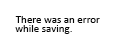
<style>
.page{position:relative;width:120px;height:48px;background:#ffffff}
.page>*{position:absolute;margin:0}
.t1{font:11px "Calibri";color:#080808}
</style>
<div class="page">
<p class="t1" style="left:15px;top:16px;width:85px;height:7px">There was an error</p>
<p class="t1" style="left:15px;top:25px;width:57px;height:9px">while saving.</p>
</div>
